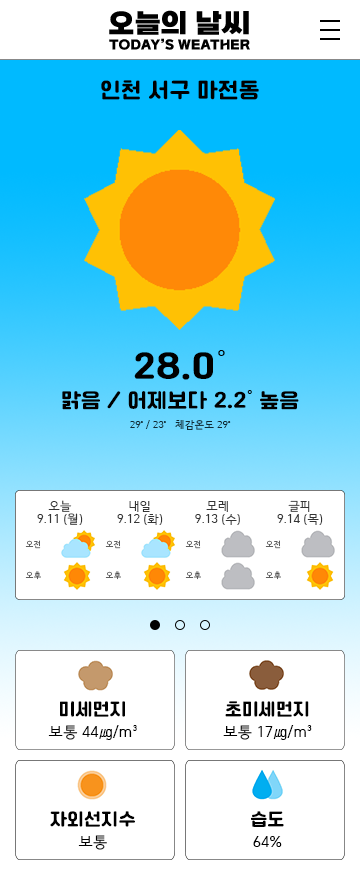
<style>
.page{position:relative;width:360px;height:870px;background:#ffffff}
.page>*{position:absolute;margin:0}
.t1{font:22px "Cafe24Ssurround";color:#000000}
.t2{font:35px "Cafe24Ssurround";color:#000000}
.t3{font:35px "Gulim";color:#000000}
.t4{font:21px "Cafe24Ssurround";color:#000000}
.t5{font:21px "Gulim";color:#000000}
.t6{font:10px "HCRDotum";color:#102b34}
.t7{font:12px/13px "HCRDotum";color:#343434}
.t8{font:8px "HCRDotum"}
.t9{font:18px "Cafe24Ssurround";color:#000000}
.t10{font:15px "HCRDotum";color:#000000}
</style>
<div class="page">
<p class="t1" style="left:101px;top:80px;width:158px;height:20px">인천 서구 마전동</p>
<p class="t2" style="left:134px;top:350px;width:91px;height:30px">28.0<span class="t3">˚</span></p>
<p class="t4" style="left:62px;top:390px;width:237px;height:20px">맑음 / 어제보다 2.2<span class="t5">˚</span> 높음</p>
<p class="t6" style="left:130px;top:420px;width:101px;height:10px">29˚ / 23˚   체감온도 29˚</p>
<p class="t7" style="left:37px;top:500px;width:46px;height:25px;text-align:center">오늘<br>9.11 (월)</p>
<p class="t7" style="left:117px;top:501px;width:46px;height:24px;text-align:center">내일<br>9.12 (화)</p>
<p class="t7" style="left:195px;top:501px;width:45px;height:24px;text-align:center">모레<br>9.13 (수)</p>
<p class="t7" style="left:277px;top:500px;width:46px;height:25px;text-align:center">글피<br>9.14 (목)</p>
<p class="t8" style="left:25px;top:540px;width:16px;height:9px">오전</p>
<p class="t8" style="left:105px;top:540px;width:16px;height:9px">오전</p>
<p class="t8" style="left:185px;top:540px;width:16px;height:9px">오전</p>
<p class="t8" style="left:265px;top:540px;width:16px;height:9px">오전</p>
<p class="t8" style="left:25px;top:571px;width:16px;height:9px">오후</p>
<p class="t8" style="left:105px;top:571px;width:16px;height:9px">오후</p>
<p class="t8" style="left:185px;top:571px;width:16px;height:9px">오후</p>
<p class="t8" style="left:265px;top:571px;width:16px;height:9px">오후</p>
<p class="t9" style="left:60px;top:701px;width:65px;height:16px">미세먼지</p>
<p class="t9" style="left:225px;top:701px;width:84px;height:16px">초미세먼지</p>
<p class="t10" style="left:48px;top:725px;width:89px;height:15px">보통 44㎍/m³</p>
<p class="t10" style="left:223px;top:725px;width:89px;height:15px">보통 17㎍/m³</p>
<p class="t9" style="left:50px;top:811px;width:85px;height:16px">자외선지수</p>
<p class="t9" style="left:251px;top:811px;width:33px;height:16px">습도</p>
<p class="t10" style="left:78px;top:835px;width:29px;height:15px">보통</p>
<p class="t10" style="left:253px;top:836px;width:29px;height:11px">64%</p>
</div>
